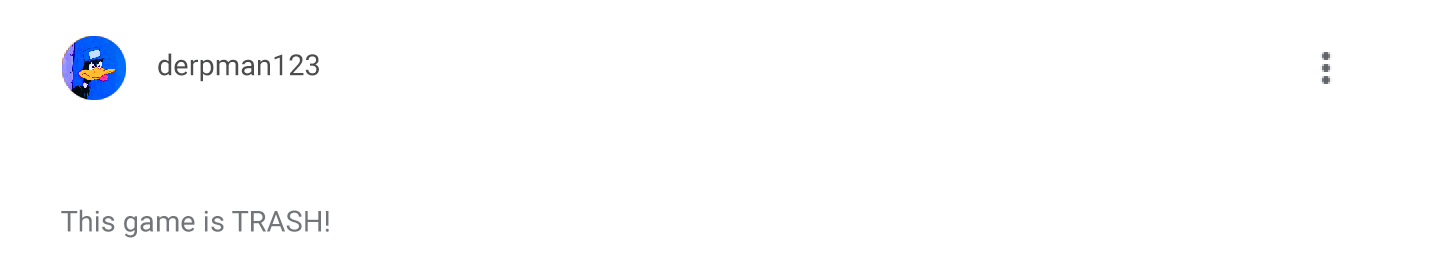
<style>
.page{position:relative;width:1438px;height:272px;background:#ffffff}
.page>*{position:absolute;margin:0}
.t1{font:29px "Roboto-Regular";color:#4b4c4e}
.t2{font:29px "Roboto-Regular"}
.t3{font:29px "Roboto-Bold"}
</style>
<div class="page">
<p class="t1" style="left:158px;top:53px;width:161px;height:29px">derpman123</p>
<p class="t2" style="left:61px;top:209px;width:420px;height:29px">This game is TRASH! <span class="t3">ONE STAR.</span></p>
</div>
